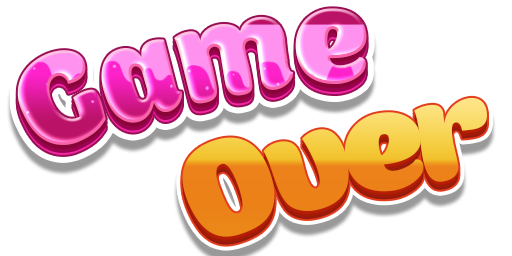
<style>
.page{position:relative;width:512px;height:256px;background:#ffffff}
.page>*{position:absolute;margin:0}
.t1{font:146.4px "Boomboom"}
.t2{font:152.3px "Boomboom";letter-spacing:-0.04em;scale:1.03 1}
</style>
<div class="page">
<p class="t1" style="left:17px;top:8px;width:350px;height:137px;rotate:-13deg">Game</p>
<p class="t2" style="left:182px;top:97px;width:305px;height:140px;rotate:-15deg">Over</p>
</div>
